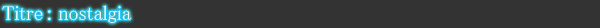
<style>
.page{position:relative;width:600px;height:28px;background:#333333}
.page>*{position:absolute;margin:0}
.t1{font:20px "MS-PMincho";color:#ffffff}
</style>
<div class="page">
<p class="t1" style="left:2px;top:5px;width:129px;height:18px">Titre : nostalgia</p>
</div>
